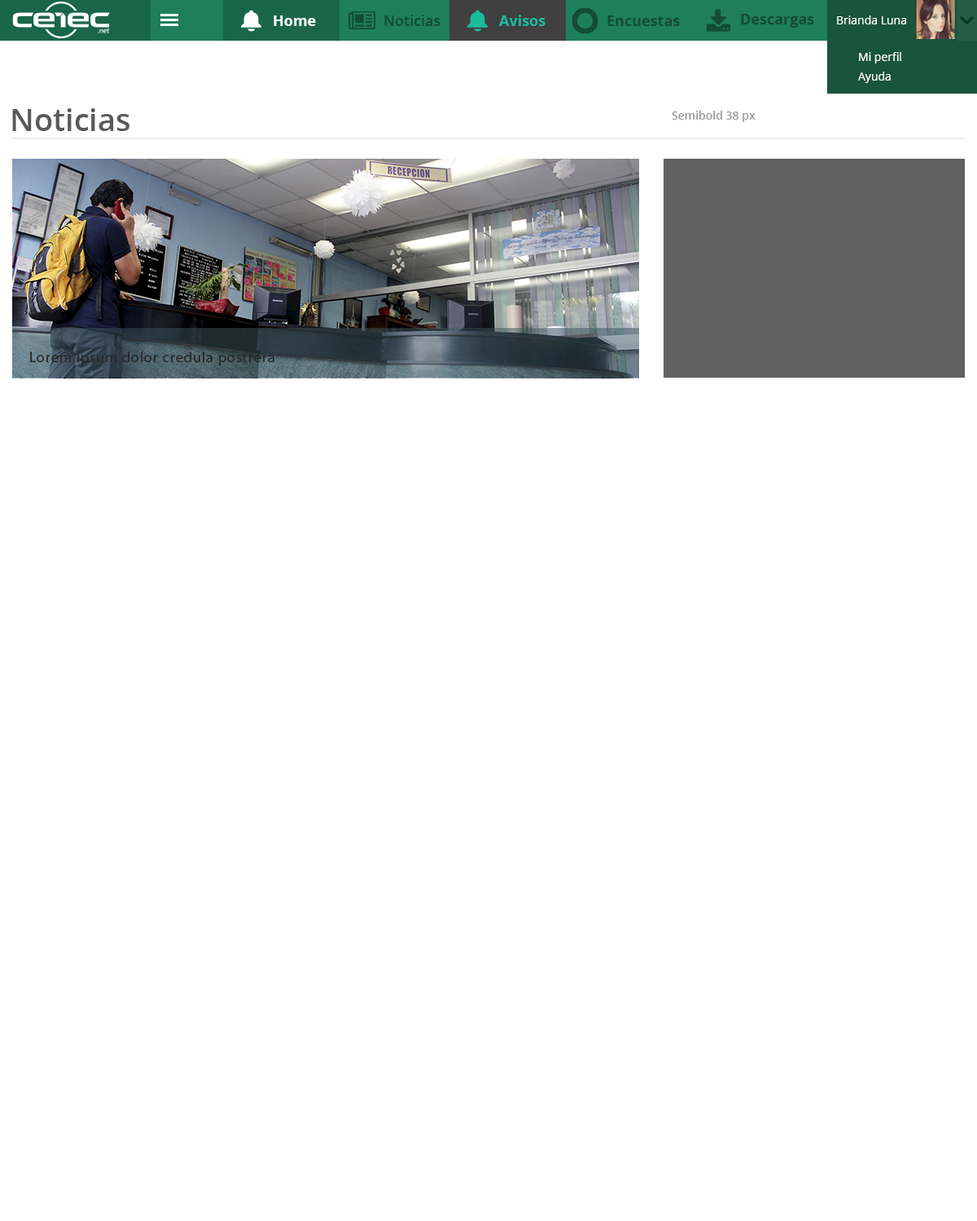
<style>
.page{position:relative;width:977px;height:1221px;background:#ffffff}
.page>*{position:absolute;margin:0}
.t1{font:14.7px "OpenSans-Bold";color:#ffffff}
.t2{font:14.7px "OpenSans-Semibold";color:#134c37}
.t3{font:14.7px "OpenSans-Bold";color:#1abc9c}
.t4{font:14.7px "OpenSans-Bold";color:#134c37}
.t5{font:11.4px "OpenSans";color:#ffffff}
.t6{font:11.4px/19.5px "OpenSans";color:#ffffff}
.t7{font:30.9px "OpenSans-Semibold";color:#595959}
.t8{font:11.4px "OpenSans-Semibold";color:#989898}
.t9{font:14.7px "MyriadPro-Regular";letter-spacing:0.06em;color:#282828}
</style>
<div class="page">
<p class="t1" style="left:273px;top:15px;width:43px;height:11px">Home</p>
<p class="t2" style="left:384px;top:15px;width:56px;height:11px">Noticias</p>
<p class="t3" style="left:499px;top:15px;width:46px;height:11px">Avisos</p>
<p class="t4" style="left:607px;top:15px;width:73px;height:11px">Encuestas</p>
<p class="t4" style="left:741px;top:14px;width:73px;height:14px">Descargas</p>
<p class="t5" style="left:837px;top:15px;width:69px;height:9px">Brianda Luna</p>
<p class="t6" style="left:858px;top:52px;width:43px;height:31px">Mi perfil<br>Ayuda</p>
<p class="t7" style="left:12px;top:108px;width:117px;height:23px">Noticias</p>
<p class="t8" style="left:671px;top:111px;width:84px;height:11px">Semibold 38 px</p>
<p class="t9" style="left:30px;top:352px;width:244px;height:13px">Lorem ipsum dolor credula postrera</p>
</div>
